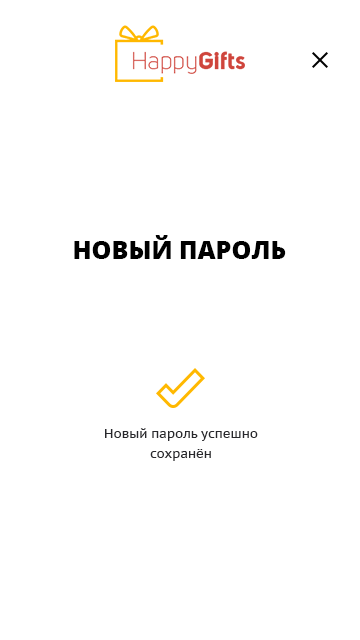
<style>
.page{position:relative;width:360px;height:640px;background:#ffffff}
.page>*{position:absolute;margin:0}
.t1{font:25px "OpenSans-Extrabold";color:#000000;text-transform:uppercase}
.t2{font:13px/20px "PTSans-Caption";color:#28282c}
</style>
<div class="page">
<p class="t1" style="left:74px;top:235px;width:212px;height:24px">Новый пароль</p>
<p class="t2" style="left:105px;top:428px;width:153px;height:33px;text-align:center">Новый пароль успешно<br>сохранён</p>
</div>
